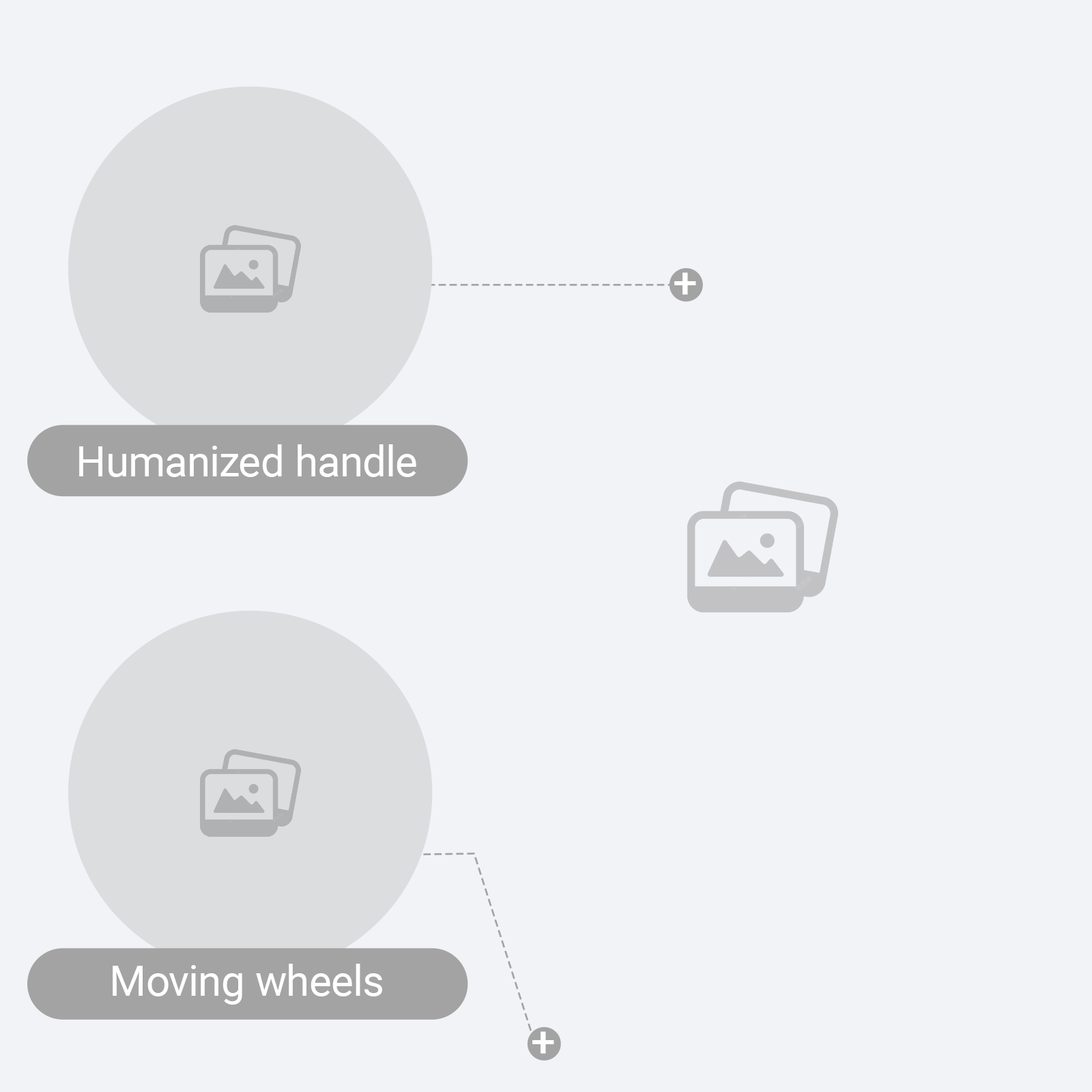
<style>
.page{position:relative;width:1092px;height:1092px;background:#f2f3f6}
.page>*{position:absolute;margin:0}
.t1{font:43.7px "Roboto-Medium";color:#ffffff}
.t2{font:42.2px "Roboto-Regular";color:#ffffff}
</style>
<div class="page">
<p class="t1" style="left:674px;top:272px;width:22px;height:23px">+</p>
<p class="t2" style="left:79px;top:444px;width:337px;height:33px">Humanized handle</p>
<p class="t2" style="left:113px;top:964px;width:269px;height:41px">Moving wheels</p>
<p class="t1" style="left:532px;top:1031px;width:22px;height:23px">+</p>
</div>
